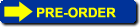
<style>
.page{position:relative;width:140px;height:27px;background:#003399}
.page>*{position:absolute;margin:0}
.t1{font:12.8px "Arial-BoldMT";color:#fcff00;text-transform:uppercase;font-weight:bold}
</style>
<div class="page">
<p class="t1" style="left:37px;top:7px;width:79px;height:11px">PRE-ORDER</p>
</div>
